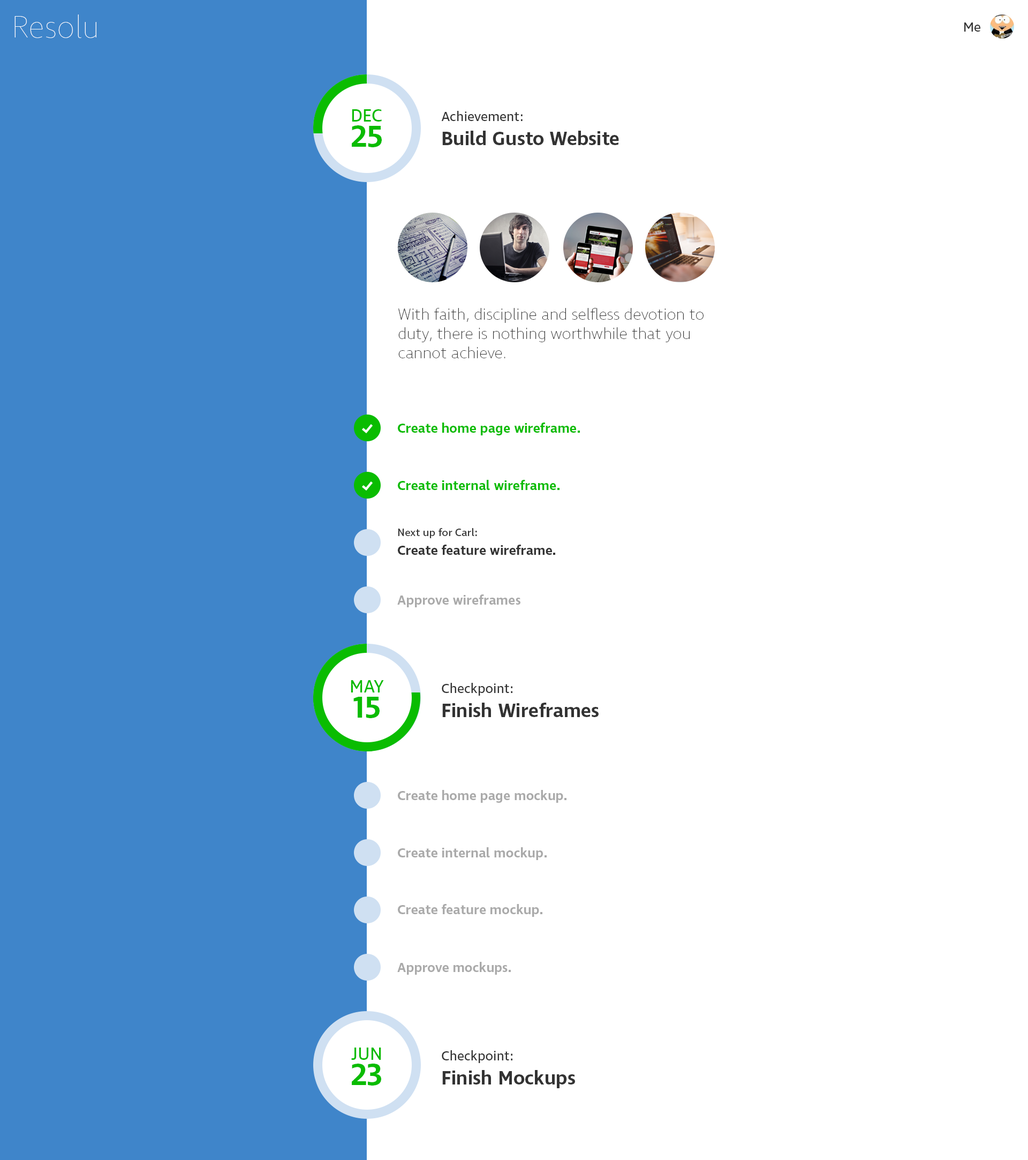
<style>
.page{position:relative;width:1028px;height:1160px;background:#ffffff}
.page>*{position:absolute;margin:0}
.t1{font:31.5px "Ingra-Hair";color:#fffefe}
.t2{font:13.4px "Ingra-Book";color:#333333}
.t3{font:17.5px/25.4px "Ingra-Book";color:#0abc01}
.t4{font:30.6px/25.4px "Ingra-SemiBold";color:#0abc01}
.t5{font:19.3px/24.1px "Ingra-SemiBold";color:#333333}
.t6{font:13.4px/24.1px "Ingra-Book";color:#333333}
.t7{font:16.1px/19.3px "Ingra-Thin";color:#333333}
.t8{font:13.4px "Ingra-SemiBold";color:#0abc01}
.t9{font:13.4px/18.7px "Ingra-SemiBold";color:#333333}
.t10{font:10.7px/18.7px "Ingra-Book";color:#333333}
.t11{font:13.4px "Ingra-SemiBold";color:#aaaaaa}
</style>
<div class="page">
<p class="t1" style="left:14px;top:14px;width:82px;height:24px">Resolu</p>
<p class="t2" style="left:964px;top:22px;width:16px;height:10px">Me</p>
<p class="t3" style="left:352px;top:109px;width:30px;height:38px">DEC<br><span class="t4">25</span></p>
<p class="t5" style="left:441px;top:111px;width:178px;height:34px"><span class="t6">Achievement:<br></span>Build Gusto Website</p>
<p class="t7" style="left:398px;top:308px;width:306px;height:50px">With faith, discipline and selfless devotion to duty, there is nothing worthwhile that you cannot achieve.</p>
<p class="t8" style="left:398px;top:422px;width:182px;height:13px">Create home page wireframe.</p>
<p class="t8" style="left:398px;top:480px;width:162px;height:10px">Create internal wireframe.</p>
<p class="t9" style="left:398px;top:528px;width:157px;height:27px"><span class="t10">Next up for Carl:<br></span>Create feature wireframe.</p>
<p class="t11" style="left:397px;top:594px;width:123px;height:13px">Approve wireframes</p>
<p class="t3" style="left:351px;top:680px;width:33px;height:38px;text-align:center">MAY<br><span class="t4">15</span></p>
<p class="t5" style="left:442px;top:683px;width:157px;height:34px"><span class="t6">Checkpoint:<br></span>Finish Wireframes</p>
<p class="t11" style="left:398px;top:790px;width:169px;height:13px">Create home page mockup.</p>
<p class="t11" style="left:398px;top:847px;width:149px;height:13px">Create internal mockup.</p>
<p class="t11" style="left:398px;top:904px;width:144px;height:13px">Create feature mockup.</p>
<p class="t11" style="left:397px;top:962px;width:114px;height:13px">Approve mockups.</p>
<p class="t3" style="left:351px;top:1047px;width:30px;height:38px;text-align:center">JUN<br><span class="t4">23</span></p>
<p class="t5" style="left:442px;top:1050px;width:133px;height:38px"><span class="t6">Checkpoint:<br></span>Finish Mockups</p>
</div>
